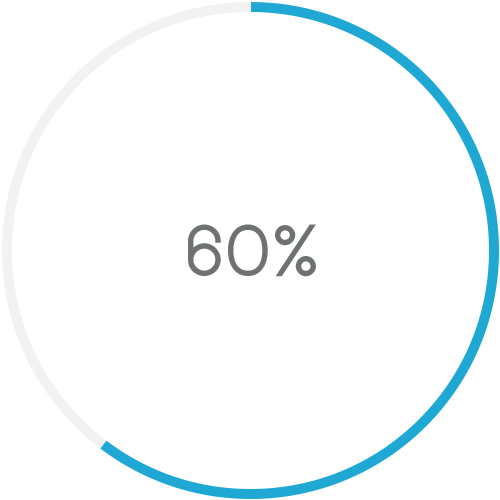
<style>
.page{position:relative;width:500px;height:500px;background:#ffffff}
.page>*{position:absolute;margin:0}
.t1{font:72px "Neou-Bold";color:#6e7273}
</style>
<div class="page">
<p class="t1" style="left:188px;top:224px;width:128px;height:53px">60%</p>
</div>
